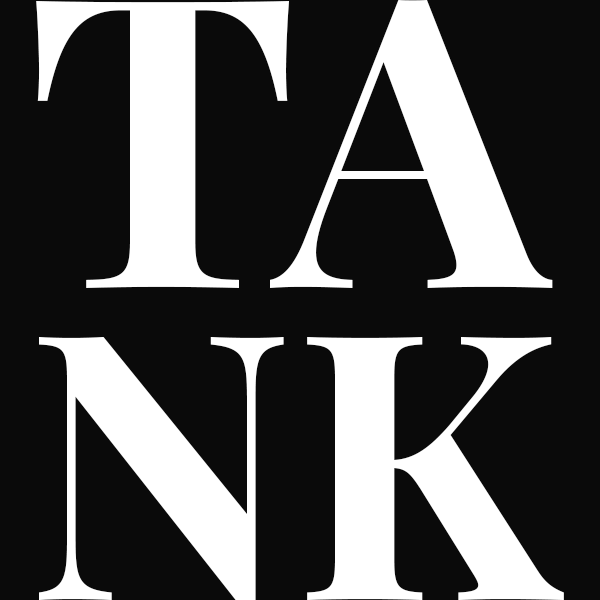
<style>
.page{position:relative;width:600px;height:600px;background:#0a0a0a}
.page>*{position:absolute;margin:0}
.t1{font:405.1px "PlayfairDisplay-Bold";color:#ffffff;text-transform:uppercase}
.t2{font:371.8px "PlayfairDisplay-Bold";color:#ffffff;text-transform:uppercase}
</style>
<div class="page">
<p class="t1" style="left:36px;top:0px;width:517px;height:288px">ta</p>
<p class="t2" style="left:39px;top:337px;width:525px;height:264px">nk</p>
</div>
